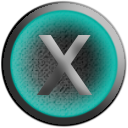
<style>
.page{position:relative;width:128px;height:128px;background:#ffffff}
.page>*{position:absolute;margin:0}
.t1{font:113.8px "ArialMT";letter-spacing:0.05em}
</style>
<div class="page">
<p class="t1" style="left:36px;top:35px;width:57px;height:60px">x</p>
</div>
